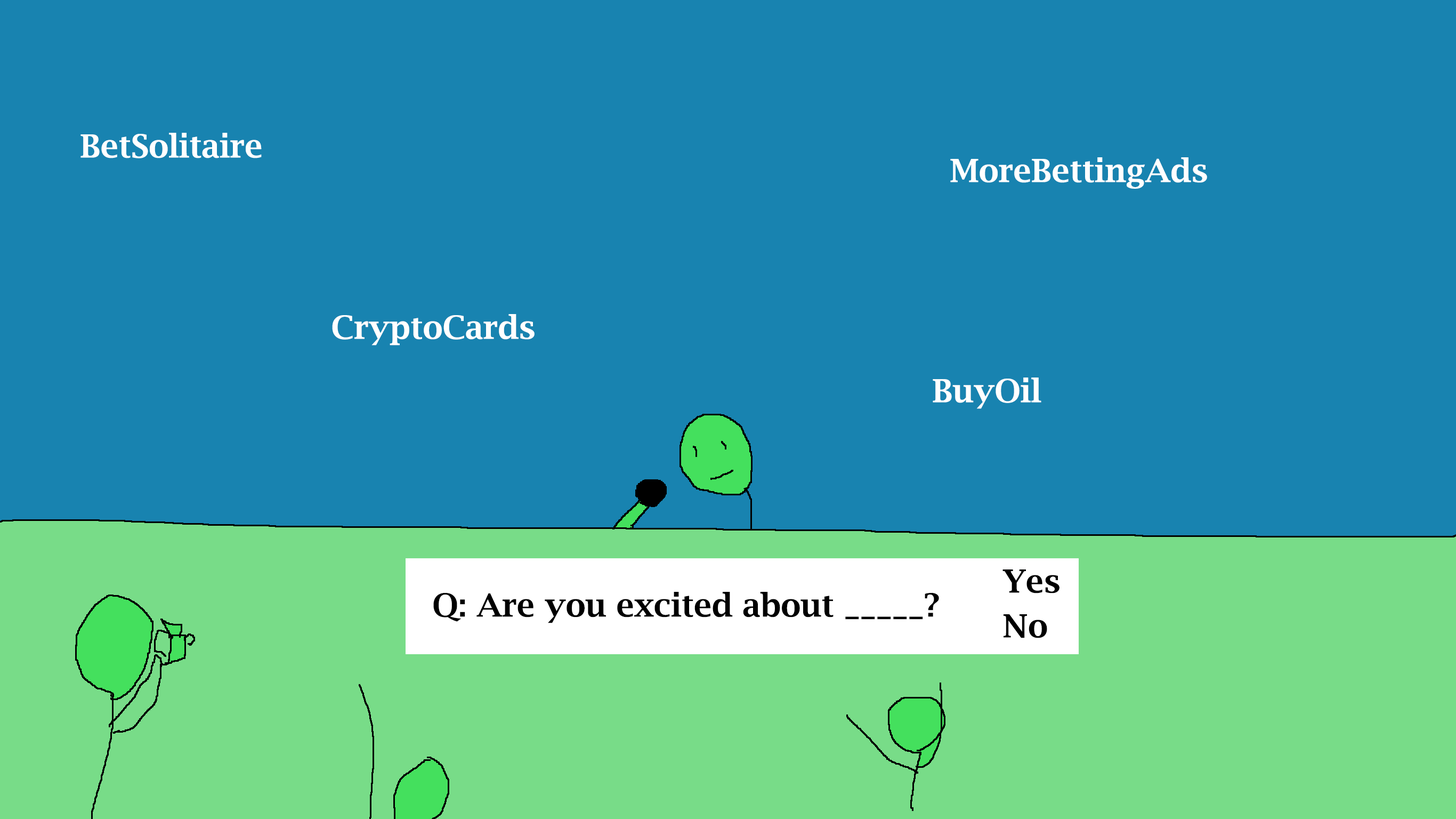
<style>
.page{position:relative;width:1456px;height:819px;background:#1883b0}
.page>*{position:absolute;margin:0}
.t1{font:32px "LucidaBright-Demi";color:#ffffff}
.t2{font:32px/7.5px "LucidaBright-Demi";color:#000000}
.t3{font:32px "LucidaBright-Demi";color:#000000}
</style>
<div class="page">
<p class="t1" style="left:80px;top:133px;width:182px;height:25px">BetSolitaire</p>
<p class="t1" style="left:950px;top:157px;width:257px;height:32px">MoreBettingAds</p>
<p class="t1" style="left:332px;top:314px;width:203px;height:31px">CryptoCards</p>
<p class="t1" style="left:933px;top:377px;width:109px;height:32px">BuyOil</p>
<p class="t2" style="left:1003px;top:569px;width:57px;height:69px">Yes<br><br><br><br><br><br>No</p>
<p class="t3" style="left:433px;top:592px;width:506px;height:31px">Q: Are you excited about _____?</p>
</div>
